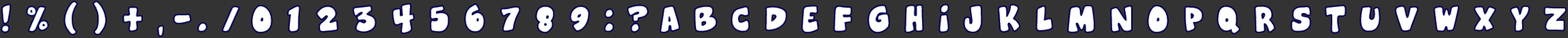
<style>
.page{position:relative;width:1568px;height:38px;background:#333333}
.page>*{position:absolute;margin:0}
.t1{font:44.4px "Cheeseburger";letter-spacing:0.35em;color:#ffffff}
</style>
<div class="page">
<p class="t1" style="left:2px;top:2px;width:1564px;height:34px">!%()+,-./0123456789:?ABCDEFGHIJKLMNOPQRSTUVWXYZ</p>
</div>
